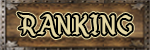
<style>
.page{position:relative;width:150px;height:50px}
.page>*{position:absolute;margin:0}
.t1{font:30.8px "EnchantedLand";color:#e4d7a3}
</style>
<div class="page">
<p class="t1" style="left:18px;top:13px;width:114px;height:24px">RANKING</p>
<p class="t1" style="left:18px;top:13px;width:114px;height:24px">RANKING</p>
</div>
